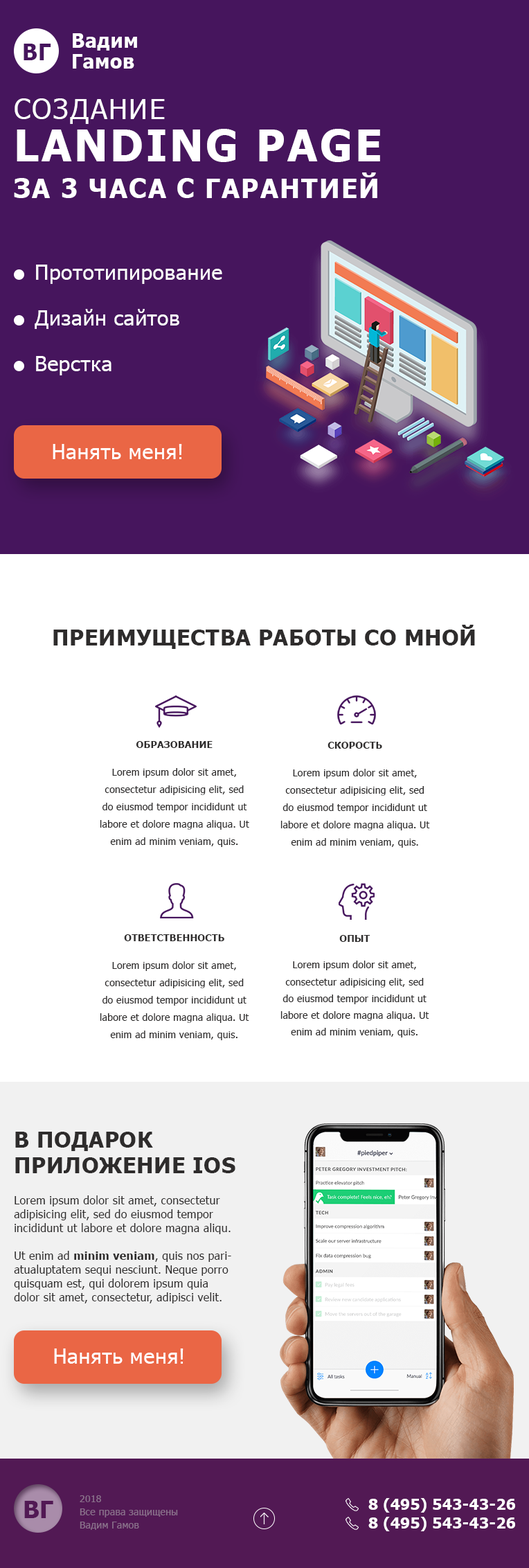
<style>
.page{position:relative;width:529px;height:1568px;background:#ffffff}
.page>*{position:absolute;margin:0}
.t1{font:19.8px/20.9px "Tahoma-Bold";letter-spacing:0.02em;color:#ffffff}
.t2{font:22.6px "Tahoma-Bold";letter-spacing:0.02em;color:#46155d}
.t3{font:26.3px/26.3px "Tahoma-Bold";letter-spacing:0.06em;color:#ffffff;text-transform:uppercase}
.t4{font:27.7px/42.2px "Tahoma";letter-spacing:0.06em;color:#ffffff;text-transform:uppercase}
.t5{font:43.6px/42.2px "Tahoma-Bold";letter-spacing:0.06em;color:#ffffff;text-transform:uppercase}
.t6{font:26.3px/36.7px "Tahoma-Bold";letter-spacing:0.06em;color:#ffffff;text-transform:uppercase}
.t7{font:20.8px/45.7px "Tahoma";letter-spacing:0.02em;color:#ffffff}
.t8{font:20.8px "Tahoma";letter-spacing:0.02em;color:#ffffff}
.t9{font:22.2px "Tahoma-Bold";letter-spacing:0.02em;color:#2e2c2c;text-transform:uppercase}
.t10{font:9.7px/17.3px "Tahoma";letter-spacing:0.02em;color:#2e2c2c}
.t11{font:9.7px/27.7px "Tahoma-Bold";letter-spacing:0.02em;color:#2e2c2c;text-transform:uppercase}
.t12{font:9.7px/27.7px "Tahoma";letter-spacing:0.02em;color:#2e2c2c}
.t13{font:9.4px/16.7px "Tahoma";letter-spacing:0.02em;color:#2e2c2c}
.t14{font:9.4px/26.8px "Tahoma-Bold";letter-spacing:0.02em;color:#2e2c2c;text-transform:uppercase}
.t15{font:9.4px/26.8px "Tahoma";letter-spacing:0.02em;color:#2e2c2c}
.t16{font:22.2px/25.6px "Tahoma-Bold";letter-spacing:0.02em;color:#2e2c2c;text-transform:uppercase}
.t17{font:11.1px/13.9px "Tahoma";letter-spacing:0.02em;color:#2e2c2c}
.t18{font:11.1px/13.9px "Tahoma-Bold";letter-spacing:0.02em;color:#2e2c2c}
.t19{font:24.1px "Tahoma-Bold";letter-spacing:0.02em;color:#521954}
.t20{font:9.7px/13.2px "Tahoma";letter-spacing:0.02em;color:#8a6f8b}
.t21{font:15.2px "Tahoma-Bold";letter-spacing:0.02em;color:#ffffff}
</style>
<div class="page">
<p class="t1" style="left:73px;top:33px;width:64px;height:36px">Вадим <br>Гамов</p>
<p class="t2" style="left:24px;top:44px;width:27px;height:16px">ВГ</p>
<p class="t3" style="left:14px;top:98px;width:366px;height:100px"><span class="t4">Создание <br></span><span class="t5">Landing page <br></span><span class="t6">за</span> 3 часа с гарантией</p>
<p class="t7" style="left:35px;top:265px;width:187px;height:110px">Прототипирование<br>Дизайн сайтов<br>Верстка</p>
<p class="t8" style="left:53px;top:444px;width:129px;height:15px">Нанять меня!</p>
<p class="t9" style="left:53px;top:625px;width:422px;height:24px">Преимущества работы со мной</p>
<p class="t10" style="left:100px;top:741px;width:149px;height:106px;text-align:center"><span class="t11">Образование<br></span><span class="t12">Lorem ipsum dolor sit amet,</span> consectetur adipisicing elit, sed do eiusmod tempor incididunt ut labore et dolore magna aliqua. Ut enim ad minim veniam, quis.</p>
<p class="t10" style="left:280px;top:742px;width:150px;height:106px;text-align:center"><span class="t11">Скорость<br></span><span class="t12">Lorem ipsum dolor sit amet,</span> consectetur adipisicing elit, sed do eiusmod tempor incididunt ut labore et dolore magna aliqua. Ut enim ad minim veniam, quis.</p>
<p class="t10" style="left:100px;top:934px;width:149px;height:106px;text-align:center"><span class="t11">Ответственность<br></span><span class="t12">Lorem ipsum dolor sit amet, </span>consectetur adipisicing elit, sed do eiusmod tempor incididunt ut labore et dolore magna aliqua. Ut enim ad minim veniam, quis.</p>
<p class="t13" style="left:280px;top:935px;width:149px;height:102px;text-align:center"><span class="t14">Опыт<br></span><span class="t15">Lorem ipsum dolor sit amet,</span> consectetur adipisicing elit, sed do eiusmod tempor incididunt ut labore et dolore magna aliqua. Ut enim ad minim veniam, quis.</p>
<p class="t16" style="left:15px;top:1132px;width:220px;height:41px">в подарок<br>приложение ios</p>
<p class="t17" style="left:14px;top:1195px;width:217px;height:108px">Lorem ipsum dolor sit amet, consectetur adipisicing elit, sed do eiusmod tempor incididunt ut labore et dolore magna aliqu.<br> <br>Ut enim ad <span class="t18">minim veniam</span>, quis nos pariatualuptatem sequi nesciunt. Neque porro quisquam est, qui dolorem ipsum quia dolor sit amet, consectetur, adipisci velit.</p>
<p class="t8" style="left:54px;top:1348px;width:130px;height:16px">Нанять меня!</p>
<p class="t19" style="left:24px;top:1501px;width:29px;height:17px">ВГ</p>
<p class="t20" style="left:80px;top:1495px;width:98px;height:35px">2018<br>Все права защищены<br>Вадим Гамов</p>
<p class="t21" style="left:368px;top:1498px;width:147px;height:15px">8 (495) 543-43-26</p>
<p class="t21" style="left:368px;top:1517px;width:147px;height:14px">8 (495) 543-43-26</p>
</div>
